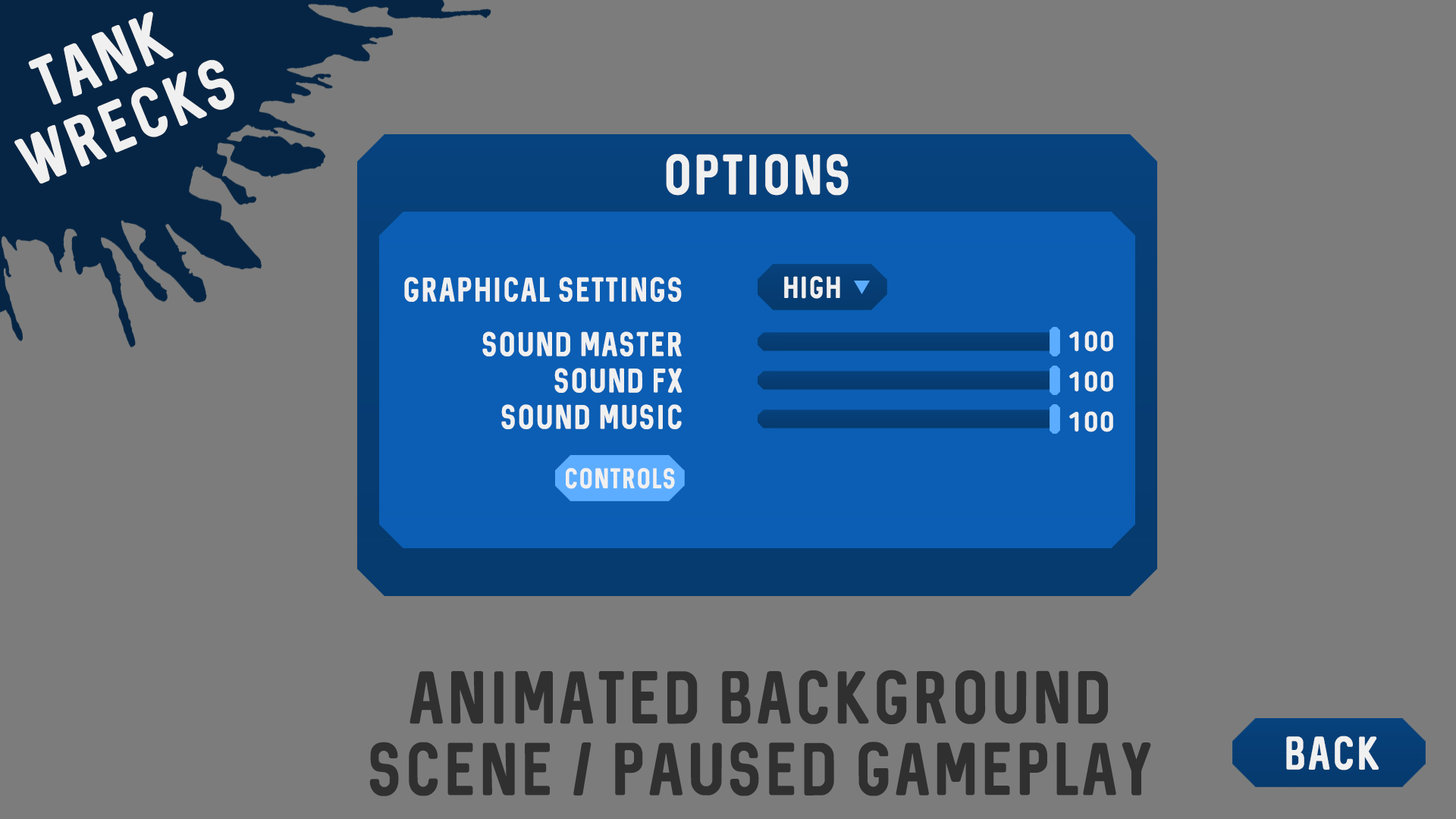
<style>
.page{position:relative;width:1456px;height:819px;background:#7c7c7c}
.page>*{position:absolute;margin:0}
.t1{font:56.6px "Sequel-Regular";letter-spacing:0.075em;color:#f0f0f0;text-transform:uppercase;scale:0.95 1}
.t2{font:45.5px "Sequel-Regular";letter-spacing:0.075em;color:#f0f0f0;text-transform:uppercase;scale:0.95 1}
.t3{font:27.3px/36.4px "Sequel-Regular";letter-spacing:0.075em;color:#f0f0f0;text-transform:uppercase;scale:0.95 1}
.t4{font:27.3px "Sequel-Regular";letter-spacing:0.075em;color:#f0f0f0;text-transform:uppercase;scale:0.95 1}
.t5{font:27.3px/54.6px "Sequel-Regular";letter-spacing:0.075em;color:#f0f0f0;text-transform:uppercase;scale:0.95 1}
.t6{font:24.4px "Sequel-Regular";letter-spacing:0.075em;color:#f0f0f0;text-transform:uppercase;scale:0.95 1}
.t7{font:27.3px/40.2px "BloggerSans-Bold";letter-spacing:0.075em;color:#f0f0f0;text-transform:uppercase;scale:0.95 1}
.t8{font:22.7px "Sequel-Regular";letter-spacing:0.075em;color:#f0f0f0;text-transform:uppercase;scale:0.95 1}
.t9{font:59.7px "Sequel-Regular";letter-spacing:0.075em;color:#303030;text-transform:uppercase;scale:0.95 1}
.t10{font:37.6px "Sequel-Regular";letter-spacing:0.075em;color:#f0f0f0;text-transform:uppercase;scale:0.95 1}
</style>
<div class="page">
<p class="t1" style="left:14px;top:11px;width:220px;height:173px;text-align:center;rotate:-22deg">Tank<br>Wrecks</p>
<p class="t2" style="left:666px;top:154px;width:183px;height:42px">Options</p>
<p class="t3" style="left:404px;top:277px;width:278px;height:152px;text-align:right"><span class="t4">graphical settings<br></span><span class="t5">sound master<br></span>sound fx<br>sound music</p>
<p class="t6" style="left:784px;top:276px;width:56px;height:23px">high</p>
<p class="t7" style="left:1069px;top:331px;width:44px;height:101px;text-align:center">100<br>100<br>100</p>
<p class="t8" style="left:566px;top:468px;width:109px;height:21px">Controls</p>
<p class="t9" style="left:369px;top:670px;width:782px;height:126px;text-align:center">animated background<br>scene / paused gameplay</p>
<p class="t10" style="left:1286px;top:736px;width:93px;height:34px">BACK</p>
</div>
